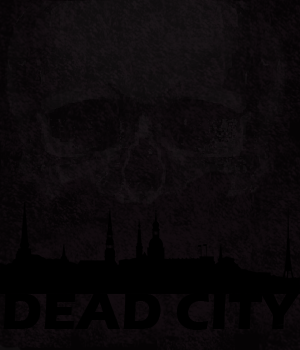
<style>
.page{position:relative;width:300px;height:350px}
.page>*{position:absolute;margin:0}
.t1{font:53px "ErasITC-Bold";color:#000000}
</style>
<div class="page">
<p class="t1" style="left:3px;top:293px;width:296px;height:37px">DEAD CITY</p>
</div>
